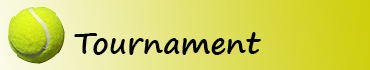
<style>
.page{position:relative;width:370px;height:70px}
.page>*{position:absolute;margin:0}
.t1{font:30px "SegoePrint-Bold";color:#000000}
</style>
<div class="page">
<p class="t1" style="left:74px;top:32px;width:187px;height:23px">Tournament</p>
</div>
